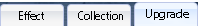
<style>
.page{position:relative;width:198px;height:26px;background:#f6f6f6}
.page>*{position:absolute;margin:0}
.t1{font:12px "MyriadPro-Regular";color:#000000}
.t2{font:12px "MyriadPro-Regular";color:#000000;scale:0.9 1}
</style>
<div class="page">
<p class="t1" style="left:19px;top:11px;width:25px;height:9px">Effect</p>
<p class="t2" style="left:78px;top:11px;width:45px;height:9px">Collection</p>
<p class="t1" style="left:146px;top:9px;width:43px;height:11px">Upgrade</p>
</div>
